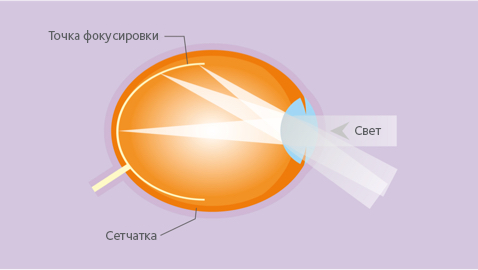
<style>
.page{position:relative;width:478px;height:270px;background:#d4c6df}
.page>*{position:absolute;margin:0}
.t1{font:13px "FoundrySterlingOT3-Medium";color:#5c5f62}
</style>
<div class="page">
<p class="t1" style="left:48px;top:30px;width:110px;height:13px">Точка фокусировки</p>
<p class="t1" style="left:355px;top:126px;width:27px;height:9px">Свет</p>
<p class="t1" style="left:106px;top:231px;width:51px;height:9px">Сетчатка</p>
</div>
